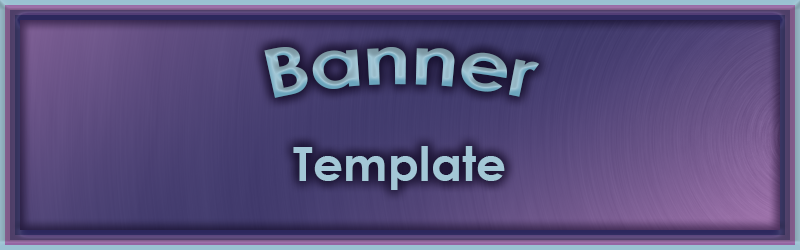
<style>
.page{position:relative;width:800px;height:250px}
.page>*{position:absolute;margin:0}
.t1{font:67.6px "CenturyGothic-Bold"}
.t2{font:47.5px "CenturyGothic-Bold";color:#a3c7d6}
</style>
<div class="page">
<p class="t1" style="left:264px;top:47px;width:275px;height:51px">Banner</p>
<p class="t2" style="left:293px;top:146px;width:212px;height:44px">Template</p>
</div>
